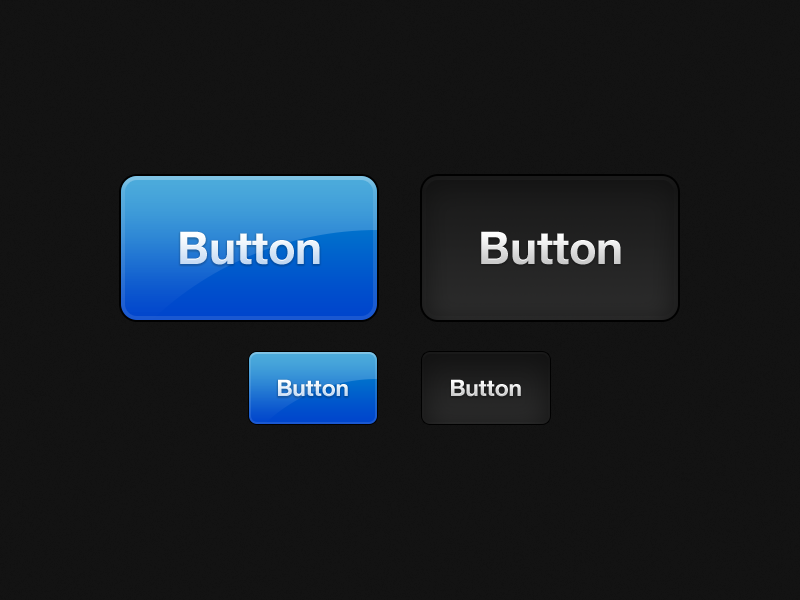
<style>
.page{position:relative;width:800px;height:600px;background:#131313}
.page>*{position:absolute;margin:0}
.t1{font:45.3px "HelveticaNeue-Bold"}
.t2{font:45.3px "HelveticaNeue-Bold";color:#e1e1e1}
.t3{font:22.6px "HelveticaNeue-Bold"}
.t4{font:22.6px "HelveticaNeue-Bold";color:#e4e4e4}
</style>
<div class="page">
<p class="t1" style="left:180px;top:231px;width:140px;height:34px">Button</p>
<p class="t2" style="left:481px;top:231px;width:140px;height:34px">Button</p>
<p class="t3" style="left:278px;top:379px;width:70px;height:18px">Button</p>
<p class="t4" style="left:451px;top:379px;width:70px;height:18px">Button</p>
</div>
